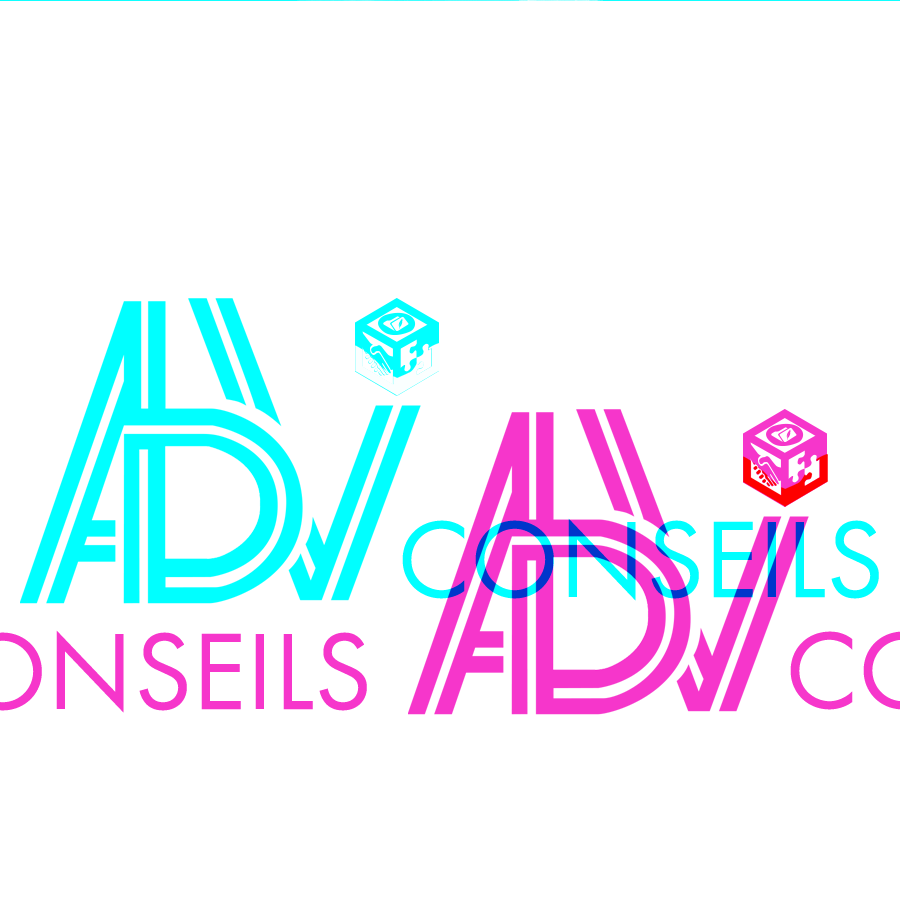
<style>
.page{position:relative;width:900px;height:900px;background:#ffffff}
.page>*{position:absolute;margin:0}
.t1{font:112.6px "FuturaPT-Book"}
</style>
<div class="page">
<p class="t1" style="left:402px;top:517px;width:477px;height:83px">CONSEILS</p>
</div>
